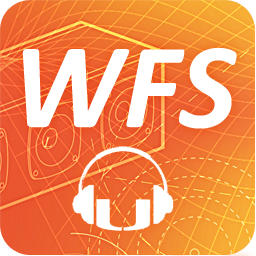
<style>
.page{position:relative;width:256px;height:256px}
.page>*{position:absolute;margin:0}
.t1{font:122.7px "Calibri-BoldItalic";color:#ffffff}
</style>
<div class="page">
<p class="t1" style="left:22px;top:48px;width:215px;height:81px">WFS</p>
</div>
